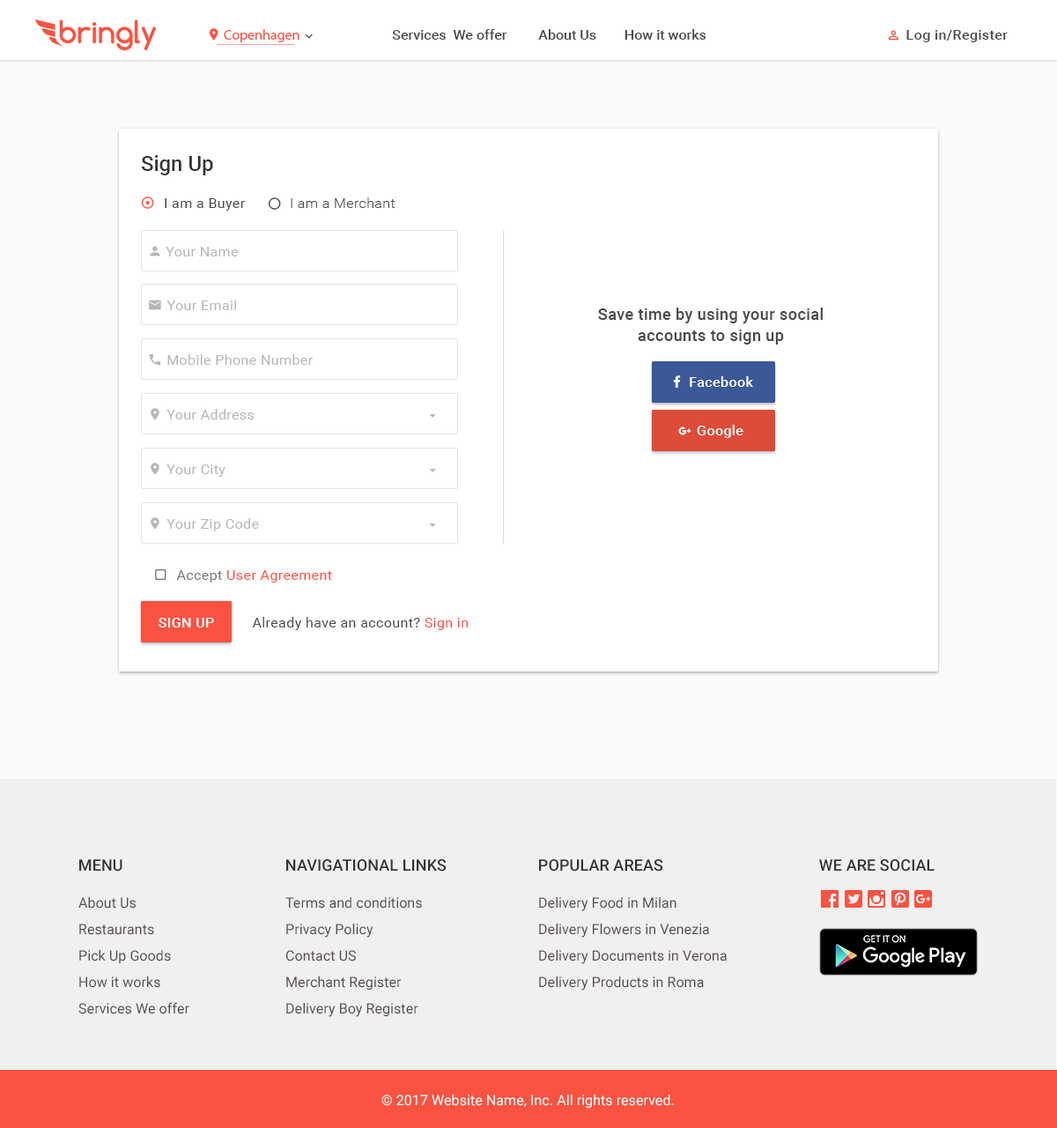
<style>
.page{position:relative;width:1057px;height:1128px;background:#ffffff}
.page>*{position:absolute;margin:0}
.t1{font:14.1px "MyriadPro-Regular";color:#fa5342}
.t2{font:14.1px "Roboto-Medium";color:#4a4a4a}
.t3{font:14.1px "Roboto-Medium";letter-spacing:0.025em;color:#4a4a4a}
.t4{font:21.1px "Roboto-Medium";color:#333333}
.t5{font:14.1px "Roboto-Light";letter-spacing:0.025em;color:#4a4a4a}
.t6{font:14.1px "Roboto-Regular";letter-spacing:0.025em;color:#4a4a4a}
.t7{font:14.1px "Roboto-Regular";letter-spacing:0.025em;color:#b6b6b6}
.t8{font:15.9px/21.1px "Roboto-Medium";letter-spacing:0.025em;color:#4a4a4a}
.t9{font:14.1px "Roboto-Medium";letter-spacing:0.025em;color:#fefefe}
.t10{font:14.1px "Roboto-Regular";letter-spacing:0.025em;color:#fa5342}
.t11{font:14.1px "Roboto-Regular";letter-spacing:0.025em;color:#777777}
.t12{font:14.1px "Roboto-Medium";letter-spacing:0.025em;color:#fefefe;text-transform:uppercase}
.t13{font:15.9px "Roboto-Medium";letter-spacing:0.005em;color:#333333}
.t14{font:15.9px "Roboto-Medium";letter-spacing:0.005em;color:#333333;text-transform:uppercase}
.t15{font:14.1px/26.4px "Roboto-Regular";letter-spacing:0.005em;color:#554c4a}
.t16{font:14.1px "Roboto-Regular";letter-spacing:0.005em;color:#ffffff}
</style>
<div class="page">
<p class="t1" style="left:224px;top:29px;width:76px;height:13px">Copenhagen</p>
<p class="t2" style="left:392px;top:29px;width:315px;height:11px">Services  We offer         About Us        How it works</p>
<p class="t3" style="left:907px;top:30px;width:101px;height:12px">Log in/Register</p>
<p class="t4" style="left:141px;top:155px;width:72px;height:20px">Sign Up</p>
<p class="t5" style="left:291px;top:197px;width:105px;height:11px">I am a Merchant</p>
<p class="t6" style="left:165px;top:198px;width:81px;height:13px">I am a Buyer</p>
<p class="t7" style="left:166px;top:247px;width:72px;height:9px">Your Name</p>
<p class="t7" style="left:167px;top:300px;width:69px;height:10px">Your Email</p>
<p class="t8" style="left:598px;top:308px;width:225px;height:37px;text-align:center">Save time by using your social accounts to sign up</p>
<p class="t7" style="left:167px;top:354px;width:147px;height:11px">Mobile Phone Number</p>
<p class="t9" style="left:690px;top:376px;width:63px;height:11px">Facebook</p>
<p class="t7" style="left:167px;top:409px;width:87px;height:10px">Your Address</p>
<p class="t9" style="left:697px;top:425px;width:47px;height:13px">Google</p>
<p class="t7" style="left:167px;top:464px;width:59px;height:13px">Your City</p>
<p class="t7" style="left:167px;top:518px;width:92px;height:13px">Your Zip Code</p>
<p class="t10" style="left:176px;top:570px;width:156px;height:12px"><span class="t11">Accept </span>User Agreement</p>
<p class="t12" style="left:159px;top:618px;width:55px;height:9px">sign up</p>
<p class="t6" style="left:252px;top:617px;width:217px;height:13px">Already have an account? <span class="t10">Sign in</span></p>
<p class="t13" style="left:79px;top:859px;width:43px;height:12px">MENU</p>
<p class="t14" style="left:286px;top:859px;width:161px;height:12px">Navigational Links</p>
<p class="t14" style="left:539px;top:859px;width:124px;height:12px">Popular Areas</p>
<p class="t14" style="left:819px;top:859px;width:116px;height:12px">We are social</p>
<p class="t15" style="left:78px;top:897px;width:111px;height:117px">About Us<br>Restaurants<br>Pick Up Goods <br>How it works <br>Services We offer</p>
<p class="t15" style="left:285px;top:897px;width:137px;height:120px">Terms and conditions<br>Privacy Policy<br>Contact US <br>Merchant Register <br>Delivery Boy Register</p>
<p class="t15" style="left:539px;top:897px;width:188px;height:93px">Delivery Food in Milan<br>Delivery Flowers in Venezia<br>Delivery Documents in Verona<br>Delivery Products in Roma</p>
<p class="t16" style="left:382px;top:1094px;width:292px;height:14px">© 2017 Website Name, Inc. All rights reserved.</p>
</div>
